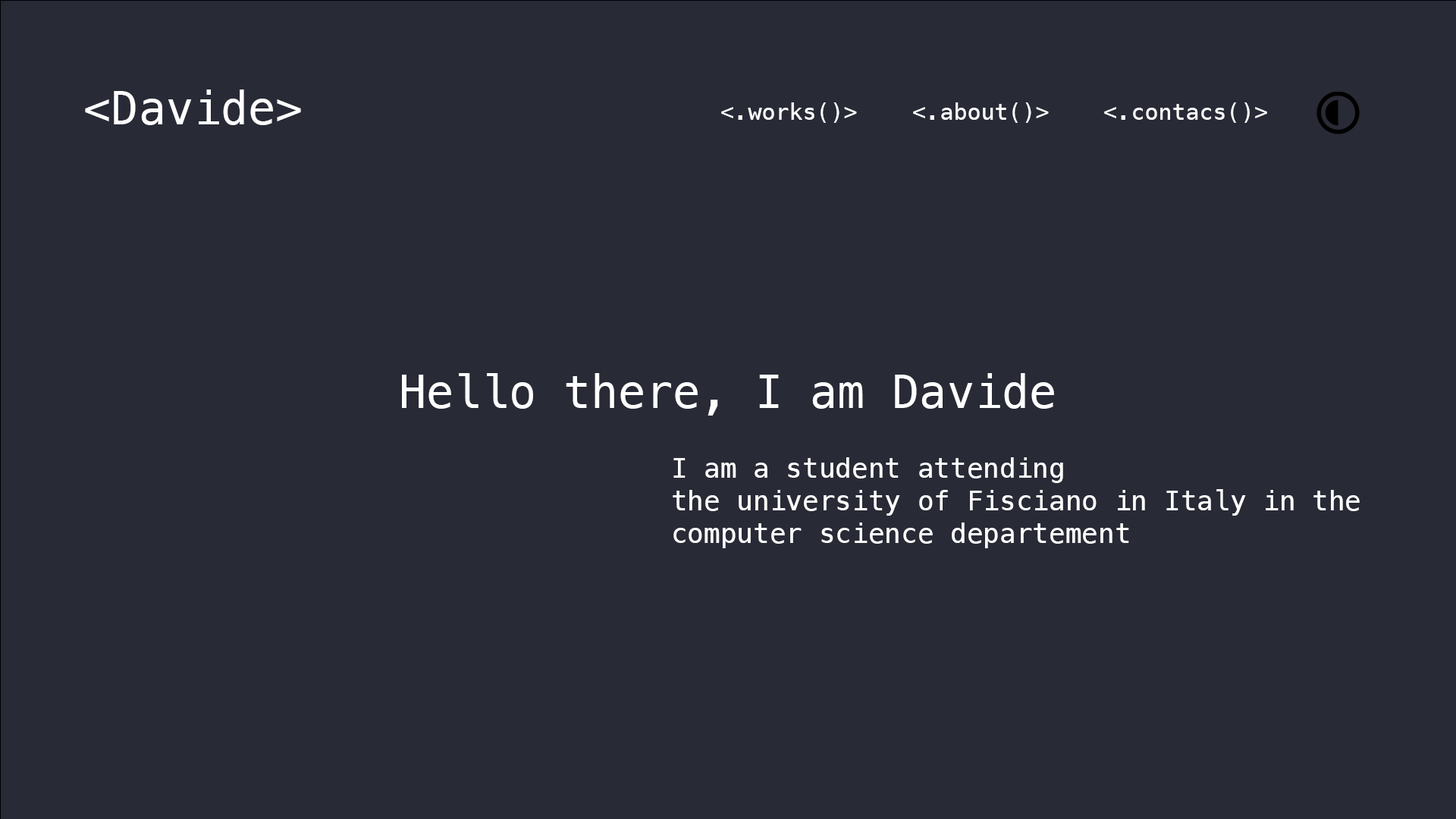
<style>
.page{position:relative;width:1456px;height:819px;background:#282a36}
.page>*{position:absolute;margin:0}
.t1{font:45.5px "Menlo-Regular";color:#ffffff}
.t2{font:22.7px "Menlo-Regular";color:#ffffff}
.t3{font:27.3px "Menlo-Regular";color:#ffffff}
</style>
<div class="page">
<p class="t1" style="left:85px;top:89px;width:216px;height:36px">&lt;Davide&gt;</p>
<p class="t2" style="left:721px;top:102px;width:136px;height:21px">&lt;.works()&gt;</p>
<p class="t2" style="left:913px;top:102px;width:136px;height:21px">&lt;.about()&gt;</p>
<p class="t2" style="left:1104px;top:102px;width:163px;height:21px">&lt;.contacs()&gt;</p>
<p class="t1" style="left:402px;top:373px;width:652px;height:43px">Hello there, I am Davide</p>
<p class="t3" style="left:673px;top:457px;width:687px;height:91px">I am a student attending <br>the university of Fisciano in Italy in the<br>computer science departement</p>
</div>
